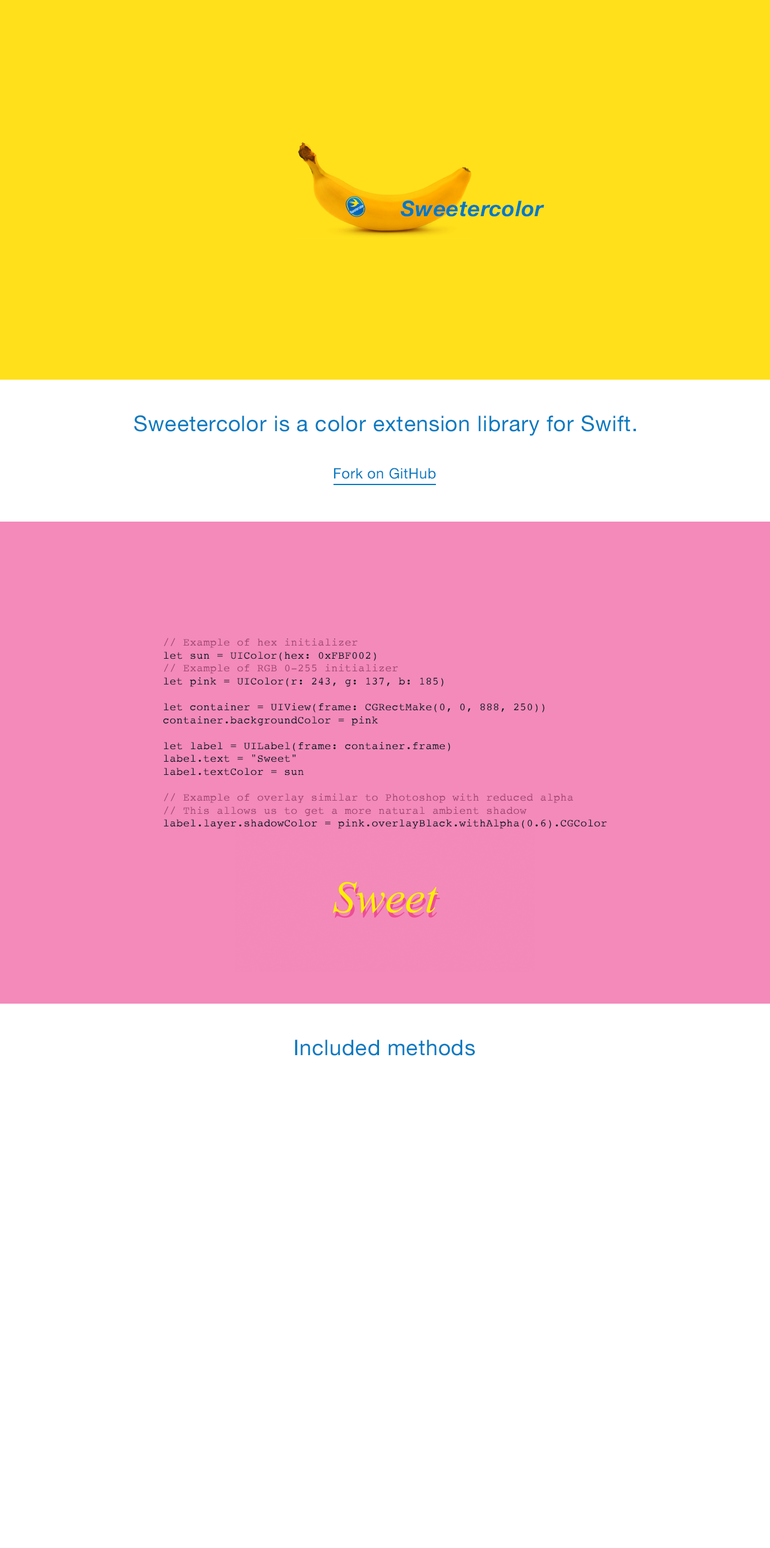
<style>
.page{position:relative;width:770px;height:1548px;background:#ffffff}
.page>*{position:absolute;margin:0}
.t1{font:21.6px "HelveticaNeue-BoldItalic";letter-spacing:0.025em;color:#0079c1}
.t2{font:21.6px "HelveticaNeue";letter-spacing:0.025em;color:#0079c1}
.t3{font:14.4px "HelveticaNeue";letter-spacing:0.025em;color:#0079c1}
.t4{font:10.8px "Courier";letter-spacing:0.025em;color:#001724}
.t5{font:10.8px "Courier";letter-spacing:0.025em;color:#a24871}
</style>
<div class="page">
<p class="t1" style="left:401px;top:200px;width:143px;height:17px">Sweetercolor</p>
<p class="t2" style="left:134px;top:415px;width:502px;height:21px">Sweetercolor is a color extension library for Swift.</p>
<p class="t3" style="left:334px;top:468px;width:102px;height:11px">Fork on GitHub</p>
<p class="t4" style="left:163px;top:638px;width:444px;height:191px"><span class="t5">// Example of hex initializer<br></span>let sun = UIColor(hex: 0xFBF002)<br><span class="t5">// Example of RGB 0-255 initializer<br></span>let pink = UIColor(r: 243, g: 137, b: 185)<br><br>let container = UIView(frame: CGRectMake(0, 0, 888, 250))<br>container.backgroundColor = pink<br><br>let label = UILabel(frame: container.frame)<br>label.text = "Sweet"<br>label.textColor = sun<br><br><span class="t5">// Example of overlay similar to Photoshop with reduced alpha<br>// This allows us to get a more natural ambient shadow<br></span>label.layer.shadowColor = pink.overlayBlack.withAlpha(0.6).CGColor</p>
<p class="t2" style="left:295px;top:1040px;width:180px;height:16px">Included methods</p>
</div>
